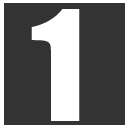
<style>
.page{position:relative;width:128px;height:128px;background:#333333}
.page>*{position:absolute;margin:0}
.t1{font:142.1px "Impact";color:#ffffff}
</style>
<div class="page">
<p class="t1" style="left:31px;top:9px;width:49px;height:112px">1</p>
</div>
